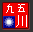
<style>
.page{position:relative;width:33px;height:32px;background:#f20000}
.page>*{position:absolute;margin:0}
.t1{font:10.4px "SimSun";color:#ffffff}
.t2{font:11.7px "SimSun";color:#ffffff}
</style>
<div class="page">
<p class="t1" style="left:6px;top:4px;width:19px;height:9px">九五</p>
<p class="t2" style="left:16px;top:15px;width:11px;height:12px">川</p>
</div>
